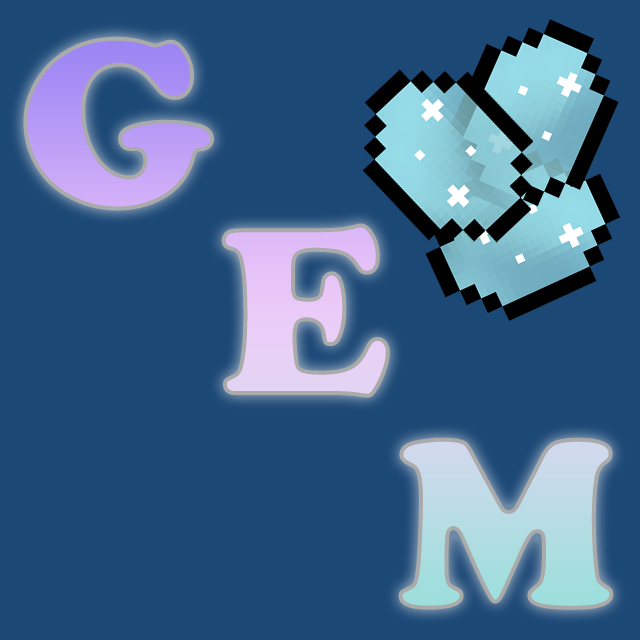
<style>
.page{position:relative;width:640px;height:640px;background:#1c4876}
.page>*{position:absolute;margin:0}
.t1{font:250px "CooperBlack"}
.t2{font:250px "CooperBlack";color:#e3c6f7}
</style>
<div class="page">
<p class="t1" style="left:23px;top:36px;width:191px;height:175px">G</p>
<p class="t2" style="left:221px;top:223px;width:169px;height:175px">E</p>
<p class="t1" style="left:398px;top:437px;width:216px;height:173px">M</p>
</div>
